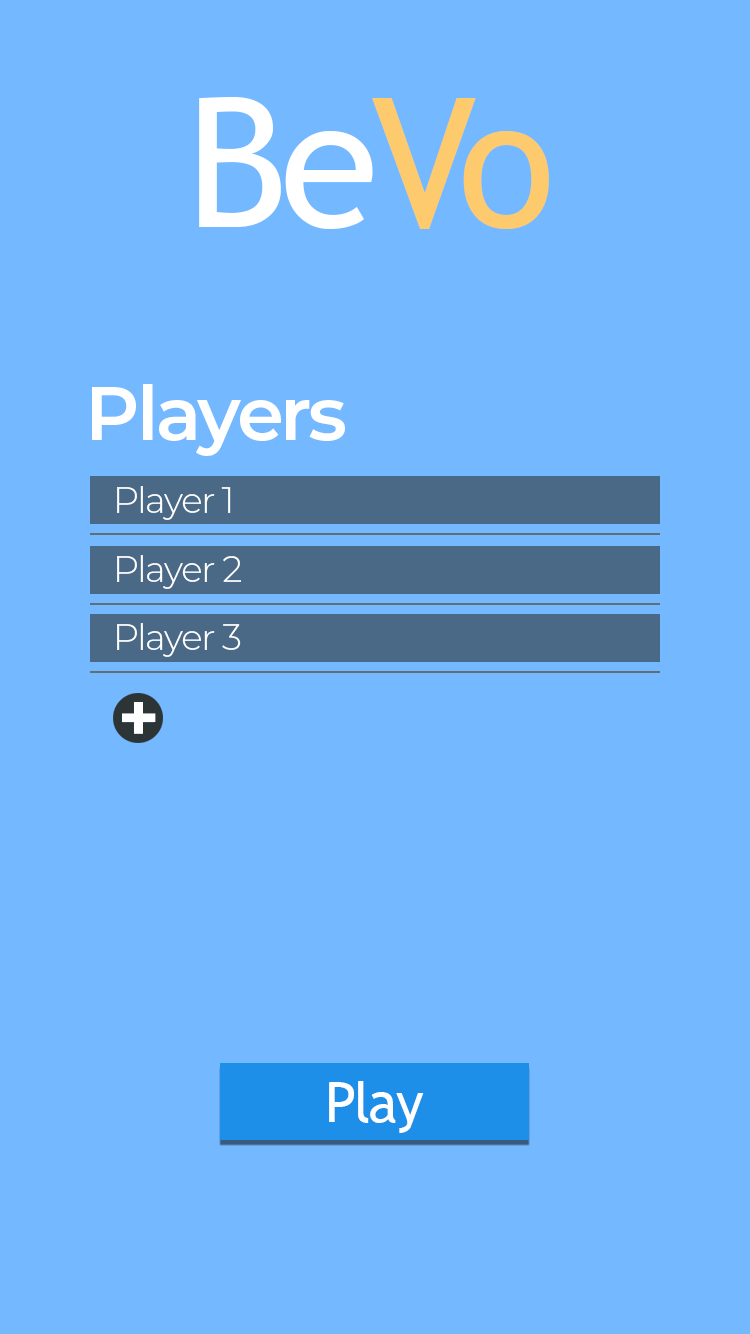
<style>
.page{position:relative;width:750px;height:1334px;background:#74b9ff}
.page>*{position:absolute;margin:0}
.t1{font:180px "TrebuchetMS";letter-spacing:-0.04em;color:#ffffff}
.t2{font:180px "TrebuchetMS";letter-spacing:-0.04em;color:#fdcb6e}
.t3{font:75px "Montserrat-SemiBold";letter-spacing:-0.04em;color:#ffffff}
.t4{font:36px "Montserrat-Light";letter-spacing:-0.04em;color:#ffffff}
.t5{font:69.8px "Montserrat-Bold";letter-spacing:-0.04em;color:#ffffff}
.t6{font:56.3px "TrebuchetMS";letter-spacing:-0.04em;color:#ffffff}
</style>
<div class="page">
<p class="t1" style="left:199px;top:97px;width:350px;height:132px">Be<span class="t2">Vo</span></p>
<p class="t3" style="left:92px;top:384px;width:253px;height:72px">Players</p>
<p class="t4" style="left:117px;top:486px;width:114px;height:34px">Player 1</p>
<p class="t4" style="left:117px;top:555px;width:124px;height:34px">Player 2</p>
<p class="t4" style="left:117px;top:623px;width:124px;height:34px">Player 3</p>
<p class="t5" style="left:122px;top:702px;width:34px;height:32px">+</p>
<p class="t6" style="left:329px;top:1081px;width:95px;height:52px">Play</p>
</div>
